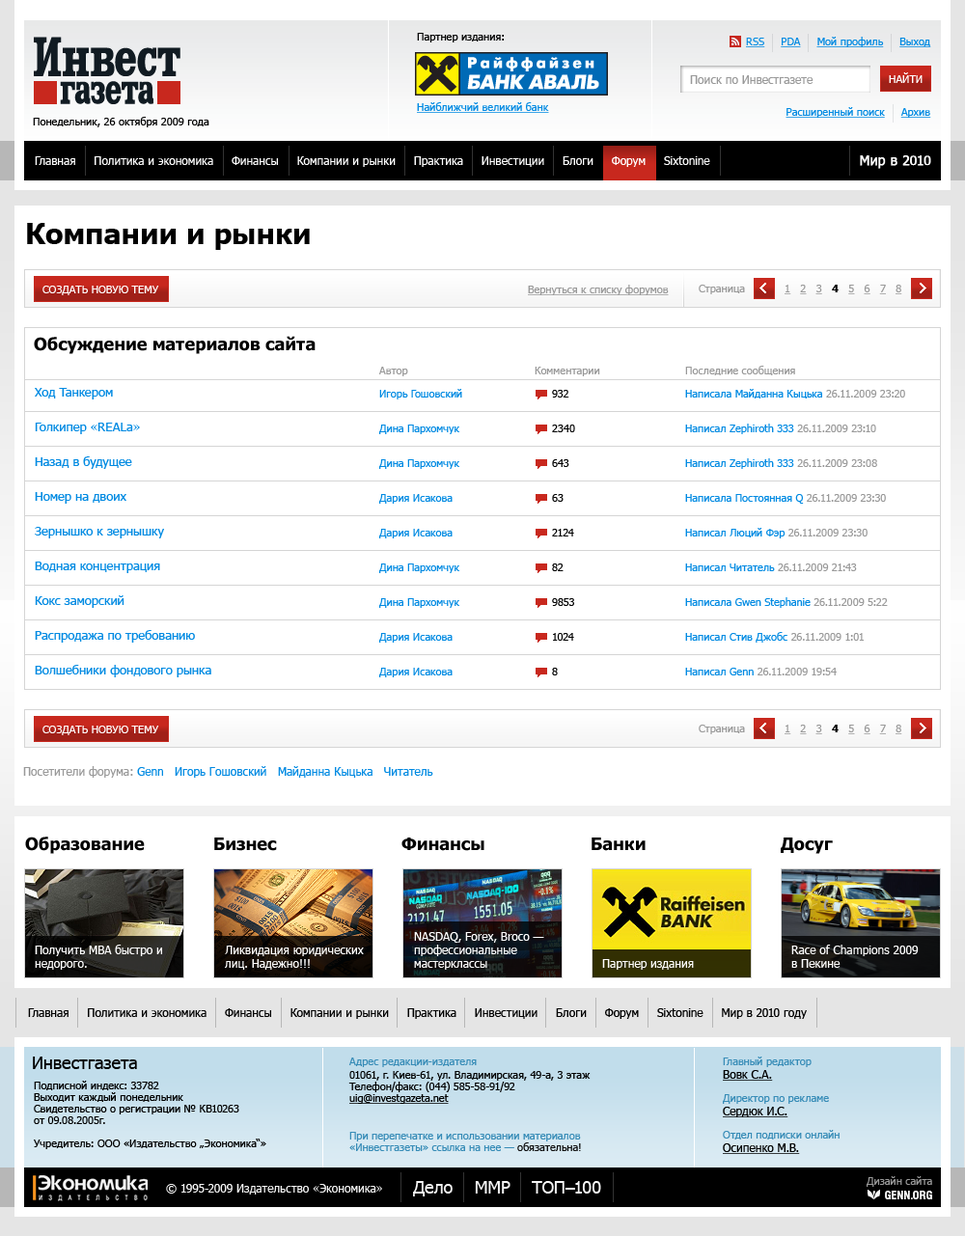
<style>
.page{position:relative;width:965px;height:1236px;background:#ffffff}
.page>*{position:absolute;margin:0}
.t1{font:10.6px "Tahoma";color:#000000}
.t2{font:10.6px "Tahoma";color:#008ae2;text-decoration:underline}
.t3{font:11.6px "Tahoma";color:#999999}
.t4{font:10.6px "Tahoma";color:#ffffff}
.t5{font:11.6px "Tahoma";color:#ffffff}
.t6{font:13.5px "Tahoma";color:#ffffff;font-weight:bold}
.t7{font:28.9px "Tahoma-Bold";color:#000000}
.t8{font:10.6px "Tahoma";color:#ffffff;text-transform:uppercase}
.t9{font:10.6px "Tahoma";color:#999999;text-decoration:underline}
.t10{font:10.6px "Tahoma";color:#999999}
.t11{font:10.6px "Tahoma-Bold";color:#000000}
.t12{font:17.4px "Tahoma-Bold";color:#000000}
.t13{font:10.6px/13.5px "Tahoma";color:#008ae2}
.t14{font:10.6px/23.2px "Tahoma";color:#999999}
.t15{font:10.6px/23.2px "Tahoma";color:#008ae2}
.t16{font:10.6px/13.5px "Tahoma";color:#999999}
.t17{font:10.6px/34.7px "Tahoma";color:#008ae2}
.t18{font:10.6px/34.7px "Tahoma";color:#999999}
.t19{font:10.6px/34.7px "Tahoma";color:#000000}
.t20{font:10.6px/23.2px "Tahoma";color:#000000}
.t21{font:12.5px/34.7px "Tahoma";color:#008ae2}
.t22{font:11.6px "Tahoma";color:#008ae2}
.t23{font:11.6px/13.5px "Tahoma";color:#ffffff}
.t24{font:11.6px "Tahoma";color:#000000}
.t25{font:17.4px "Tahoma";color:#000000}
.t26{font:10.6px/13.5px "Tahoma";color:#000000}
.t27{font:10.6px/11.6px "Tahoma";color:#378cb7}
.t28{font:10.6px/11.6px "Tahoma";color:#000000}
.t29{font:10.6px/11.6px "Tahoma";color:#000000;text-decoration:underline}
.t30{font:10.6px/23.2px "Tahoma";color:#378cb7}
.t31{font:10.6px/13.5px "Tahoma";color:#378cb7}
.t32{font:11.6px/13.5px "Tahoma";color:#000000;text-decoration:underline}
.t33{font:10.6px/11.6px "Tahoma";color:#111111}
.t34{font:17.4px "Tahoma";color:#f5f5f5}
.t35{font:11.6px "Tahoma";color:#f5f5f5}
.t36{font:11.6px "HeliosCond-Bold";color:#ffffff}
</style>
<div class="page">
<p class="t1" style="left:417px;top:33px;width:87px;height:9px">Партнер издания:</p>
<p class="t2" style="left:746px;top:37px;width:185px;height:10px">RSS     PDA     Мой профиль     Выход</p>
<p class="t3" style="left:690px;top:75px;width:123px;height:9px">Поиск по Инвестгазете</p>
<p class="t4" style="left:889px;top:72px;width:33px;height:11px">НАЙТИ</p>
<p class="t2" style="left:417px;top:102px;width:132px;height:11px">Найближчий великий банк</p>
<p class="t2" style="left:785px;top:107px;width:146px;height:11px">Расширенный поиск     Архив</p>
<p class="t1" style="left:33px;top:117px;width:176px;height:10px">Понедельник, 26 октября 2009 года</p>
<p class="t5" style="left:35px;top:155px;width:896px;height:14px">Главная     Политика и экономика     Финансы     Компании и рынки     Практика     Инвестиции     Блоги     Форум     Sixtonine                                      <span class="t6">Мир в 2010</span></p>
<p class="t7" style="left:27px;top:223px;width:283px;height:27px">Компании и рынки</p>
<p class="t8" style="left:42px;top:286px;width:117px;height:9px">Создать новую тему</p>
<p class="t9" style="left:528px;top:285px;width:141px;height:10px">Вернуться к списку форумов</p>
<p class="t10" style="left:699px;top:285px;width:46px;height:9px">Страница</p>
<p class="t9" style="left:784px;top:285px;width:118px;height:9px">1   2   3   <span class="t11">4   </span>5   6   7   8</p>
<p class="t12" style="left:34px;top:336px;width:281px;height:18px">Обсуждение материалов сайта</p>
<p class="t13" style="left:685px;top:366px;width:220px;height:309px"><span class="t14">Последние сообщения<br></span><span class="t15">Н</span>аписала Майданна Кыцька <span class="t16">26.11.2009 23:20<br></span><span class="t17">Написал Zephiroth 333 </span><span class="t18">26.11.2009 23:10<br></span><span class="t17">Написал Zephiroth 333 </span><span class="t18">26.11.2009 23:08<br></span><span class="t17">Написала Постоянная Q </span><span class="t18">26.11.2009 23:30<br></span><span class="t17">Написал Люций Фэр </span><span class="t18">26.11.2009 23:30<br></span><span class="t17">Написал Читатель </span><span class="t18">26.11.2009 21:43<br></span><span class="t17">Написала Gwen Stephanie </span><span class="t18">26.11.2009 5:22<br></span><span class="t17">Написал Стив Джобс </span><span class="t18">26.11.2009 1:01<br></span><span class="t17">Написал Genn </span><span class="t18">26.11.2009 19:54</span></p>
<p class="t17" style="left:378px;top:367px;width:84px;height:310px"><span class="t14">Автор<br></span><span class="t15">Игорь Гошовский<br></span>Дина Пархомчук<br>Дина Пархомчук<br>Дария Исакова<br>Дария Исакова<br>Дина Пархомчук<br>Дина Пархомчук<br>Дария Исакова<br>Дария Исакова</p>
<p class="t19" style="left:535px;top:367px;width:65px;height:308px"><span class="t14">Комментарии<br></span><span class="t20">932<br></span>2340<br>643<br>63<br>2124<br>82<br>9853<br>1024<br>8</p>
<p class="t21" style="left:35px;top:388px;width:176px;height:289px">Ход Танкером<br>Голкипер «REALa»<br>Назад в будущее<br>Номер на двоих<br>Зернышко к зернышку<br>Водная концентрация<br>Кокс заморский<br>Распродажа по требованию<br>Волшебники фондового рынка</p>
<p class="t8" style="left:42px;top:726px;width:117px;height:9px">Создать новую тему</p>
<p class="t10" style="left:699px;top:725px;width:46px;height:9px">Страница</p>
<p class="t9" style="left:784px;top:725px;width:118px;height:9px">1   2   3   <span class="t11">4   </span>5   6   7   8</p>
<p class="t3" style="left:23px;top:766px;width:410px;height:12px">Посетители форума: <span class="t22">Genn</span><span class="t22">   Игорь Гошовский   </span><span class="t22">Майданна Кыцька</span><span class="t22">   Читатель</span></p>
<p class="t12" style="left:25px;top:836px;width:120px;height:18px">Образование</p>
<p class="t12" style="left:214px;top:837px;width:63px;height:14px">Бизнес</p>
<p class="t12" style="left:401px;top:837px;width:83px;height:14px">Финансы</p>
<p class="t12" style="left:591px;top:837px;width:54px;height:14px">Банки</p>
<p class="t12" style="left:781px;top:837px;width:52px;height:17px">Досуг</p>
<p class="t23" style="left:414px;top:932px;width:130px;height:38px">NASDAQ, Forex, Broco —<br>профессиональные<br>мастерклассы</p>
<p class="t23" style="left:35px;top:945px;width:127px;height:25px">Получить MBA быстро и <br>недорого.</p>
<p class="t23" style="left:225px;top:946px;width:139px;height:24px">Ликвидация юридических <br>лиц. Надежно!!!</p>
<p class="t23" style="left:791px;top:945px;width:128px;height:23px">Race of Champions 2009<br>в Пекине</p>
<p class="t5" style="left:602px;top:959px;width:92px;height:11px">Партнер издания</p>
<p class="t24" style="left:28px;top:1008px;width:779px;height:11px">Главная     Политика и экономика     Финансы     Компании и рынки     Практика     Инвестиции     Блоги     Форум     Sixtonine     Мир в 2010 году</p>
<p class="t25" style="left:33px;top:1056px;width:104px;height:13px">Инвестгазета</p>
<p class="t26" style="left:348px;top:1057px;width:242px;height:47px"><span class="t27">Адрес редакции-издателя<br></span>01061, г. Киев-61, ул. Владимирская, 49-а, 3 этаж<br><span class="t28">Телефон/факс: (044) 585-58-91/92<br></span><span class="t29">uig@investgazeta.net</span></p>
<p class="t30" style="left:723px;top:1056px;width:116px;height:98px"><span class="t31">Главный редактор<br></span><span class="t32">Вовк С.А.<br></span>Директор по рекламе<br><span class="t32">Сердюк И.С.<br></span>Отдел подписки онлайн<br><span class="t32">Осипенко М.В.</span></p>
<p class="t28" style="left:34px;top:1081px;width:232px;height:68px">Подписной индекс: 33782<br>Выходит каждый понедельник<br>Свидетельство о регистрации № КВ10263 <br>от 09.08.2005г.<br><br>Учредитель: ООО «Издательство „Экономика“»</p>
<p class="t27" style="left:349px;top:1132px;width:232px;height:19px">При перепечатке и использовании материалов <br>«Инвестгазеты» ссылка на нее — <span class="t33">обязательна!</span></p>
<p class="t34" style="left:413px;top:1181px;width:188px;height:15px">Дело    ММР    ТОП–100</p>
<p class="t10" style="left:866px;top:1176px;width:66px;height:11px">Дизайн сайта</p>
<p class="t35" style="left:166px;top:1184px;width:216px;height:10px">© 1995-2009 Издательство «Экономика»</p>
<p class="t36" style="left:885px;top:1191px;width:47px;height:8px">GENN.ORG</p>
</div>
